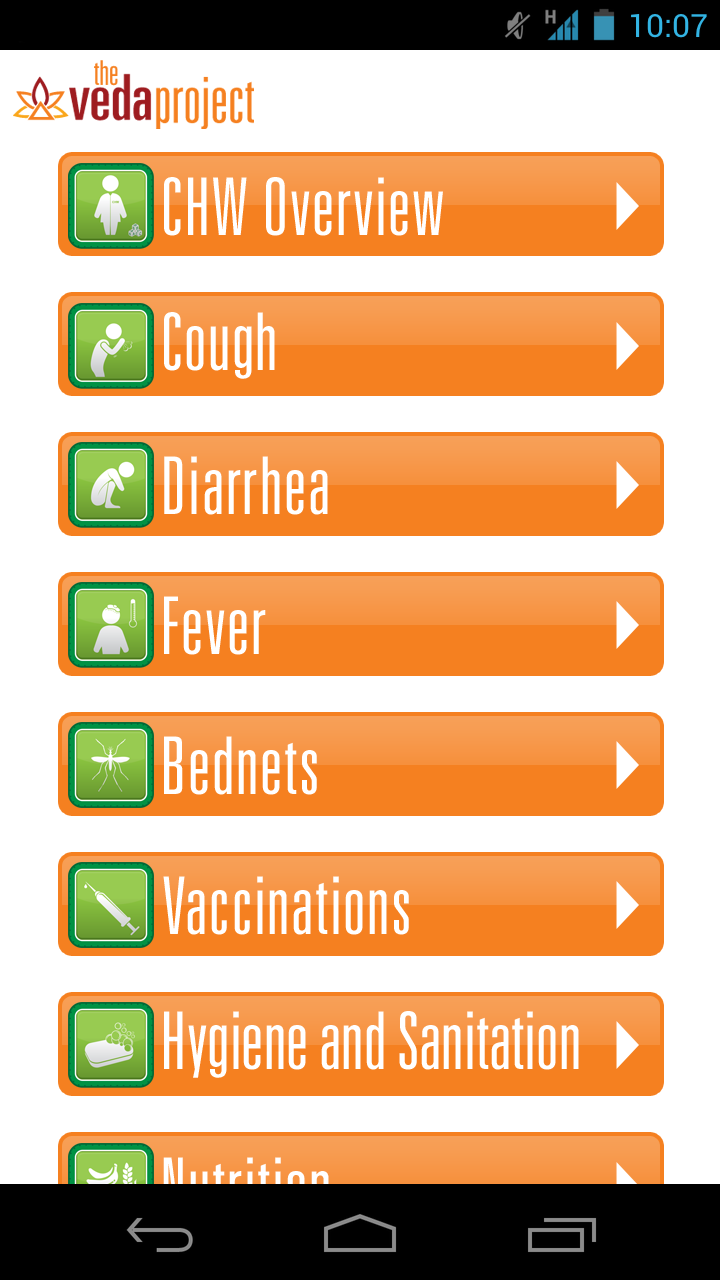
<style>
.page{position:relative;width:720px;height:1280px;background:#ffffff}
.page>*{position:absolute;margin:0}
.t1{font:80px "UniversLTStd-LightUltraCn";letter-spacing:0.02em;color:#ffffff}
.t2{font:80px "UniversLTStd-LightUltraCn";color:#ffffff}
</style>
<div class="page">
<p class="t1" style="left:164px;top:177px;width:279px;height:59px">CHW Overview</p>
<p class="t1" style="left:164px;top:312px;width:111px;height:67px">Cough</p>
<p class="t1" style="left:164px;top:456px;width:164px;height:59px">Diarrhea</p>
<p class="t1" style="left:164px;top:596px;width:102px;height:59px">Fever</p>
<p class="t1" style="left:164px;top:736px;width:153px;height:59px">Bednets</p>
<p class="t1" style="left:163px;top:876px;width:246px;height:59px">Vaccinations</p>
<p class="t2" style="left:164px;top:1011px;width:415px;height:67px">Hygiene and Sanitation</p>
</div>
